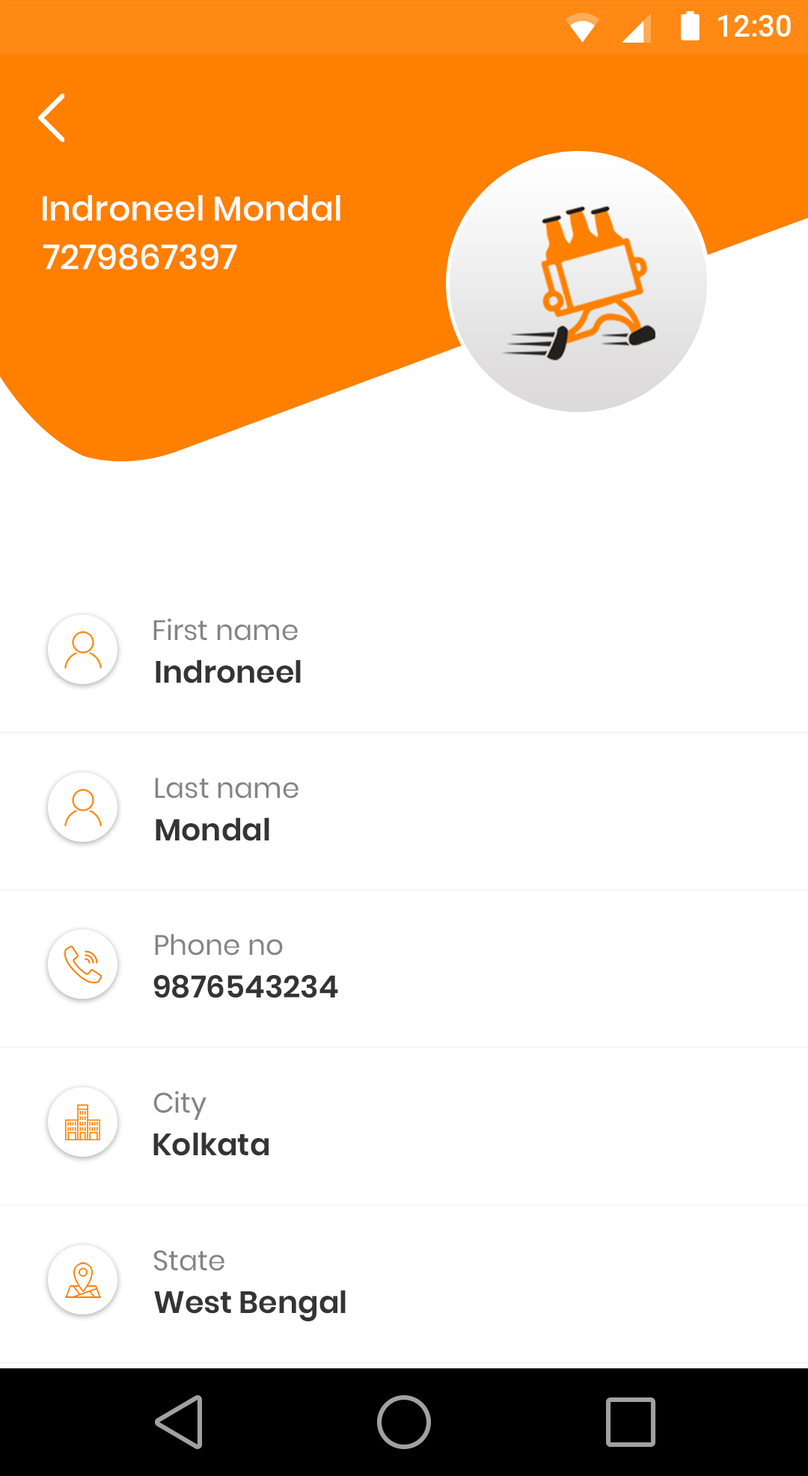
<style>
.page{position:relative;width:808px;height:1476px;background:#ffffff}
.page>*{position:absolute;margin:0}
.t1{font:30.8px "Roboto-Medium";color:#ffffff}
.t2{font:34.4px "Poppins-Medium";color:#ffffff}
.t3{font:34.4px "Poppins-Medium";color:#ffffff;text-transform:uppercase}
.t4{font:28px "Poppins-Regular";color:#848484}
.t5{font:30.7px "Poppins-SemiBold";color:#353434}
</style>
<div class="page">
<p class="t1" style="left:718px;top:15px;width:73px;height:22px">12:30</p>
<p class="t2" style="left:43px;top:195px;width:297px;height:26px"><span class="t3">I</span>ndroneel Mondal</p>
<p class="t3" style="left:43px;top:244px;width:194px;height:26px">7279867397</p>
<p class="t4" style="left:153px;top:618px;width:145px;height:23px">First name</p>
<p class="t5" style="left:156px;top:660px;width:145px;height:24px">Indroneel</p>
<p class="t4" style="left:155px;top:778px;width:143px;height:21px">Last name</p>
<p class="t5" style="left:156px;top:817px;width:113px;height:24px">Mondal</p>
<p class="t4" style="left:155px;top:934px;width:128px;height:22px">Phone no</p>
<p class="t5" style="left:153px;top:974px;width:185px;height:24px">9876543234</p>
<p class="t4" style="left:153px;top:1091px;width:53px;height:29px">City</p>
<p class="t5" style="left:153px;top:1132px;width:115px;height:24px">Kolkata</p>
<p class="t4" style="left:153px;top:1250px;width:71px;height:21px">State</p>
<p class="t5" style="left:154px;top:1290px;width:192px;height:32px">West Bengal</p>
</div>
